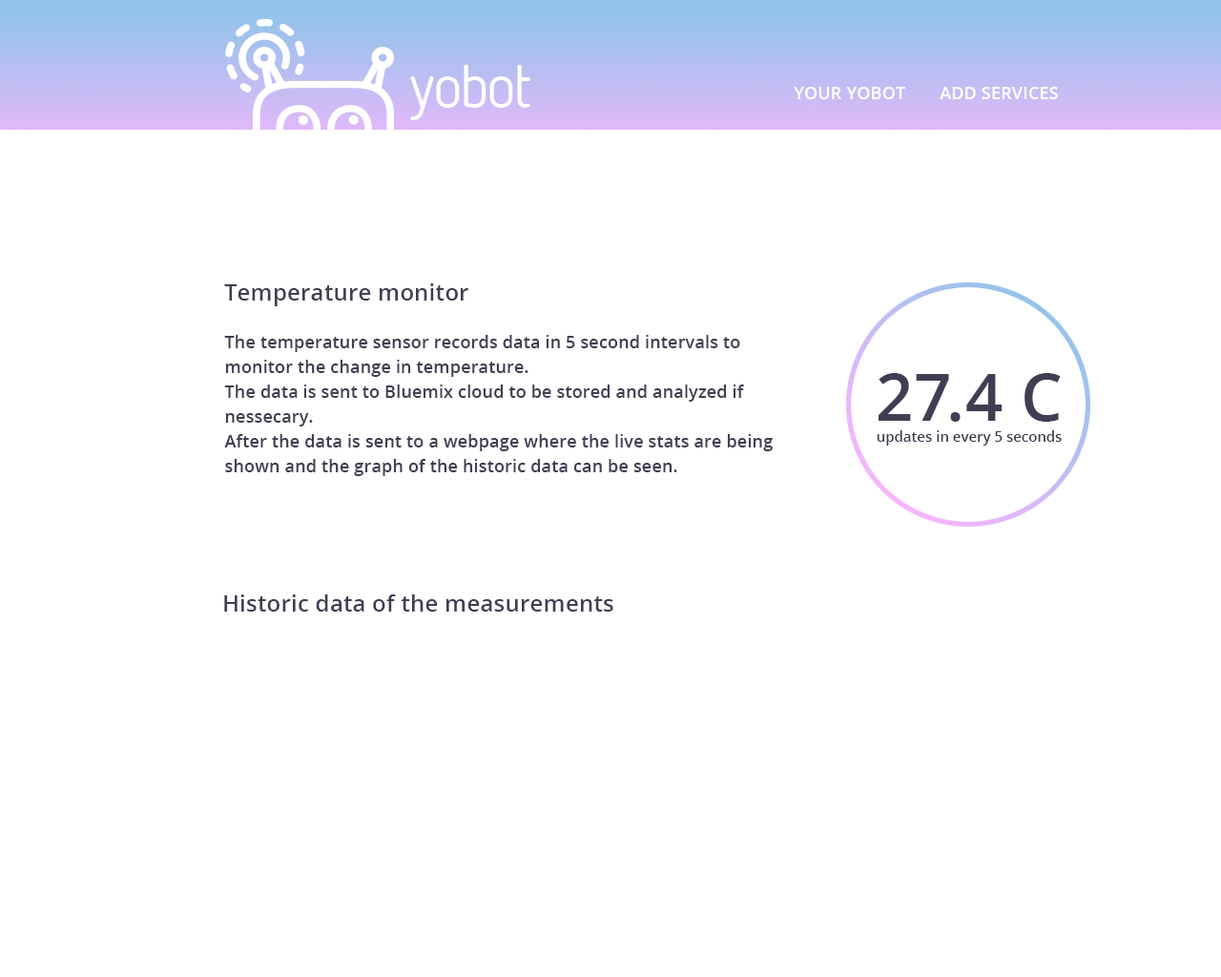
<style>
.page{position:relative;width:1221px;height:977px;background:#ffffff}
.page>*{position:absolute;margin:0}
.t1{font:17.2px "OpenSans-Semibold";letter-spacing:0.01em;color:#ffffff;text-transform:uppercase}
.t2{font:22.9px "OpenSans-Semibold";letter-spacing:0.01em;color:#433d54}
.t3{font:17.2px/24.8px "OpenSans-Semibold";letter-spacing:0.01em;color:#433d54}
.t4{font:65.5px "OpenSans-Semibold";letter-spacing:0.01em;color:#433d54}
.t5{font:14px "OpenSans-Semibold";letter-spacing:0.01em;color:#433d54}
</style>
<div class="page">
<p class="t1" style="left:794px;top:87px;width:111px;height:12px">your yobot</p>
<p class="t1" style="left:940px;top:87px;width:118px;height:12px">add services</p>
<p class="t2" style="left:224px;top:283px;width:244px;height:23px">Temperature monitor</p>
<p class="t3" style="left:224px;top:335px;width:549px;height:141px">The temperature sensor records data in 5 second intervals to monitor the change in temperature.<br>The data is sent to Bluemix cloud to be stored and analyzed if nessecary. <br>After the data is sent to a webpage where the live stats are being shown and the graph of the historic data can be seen.</p>
<p class="t4" style="left:878px;top:373px;width:183px;height:49px">27.4 C</p>
<p class="t5" style="left:877px;top:430px;width:185px;height:15px">updates in every 5 seconds</p>
<p class="t2" style="left:224px;top:594px;width:389px;height:17px">Historic data of the measurements</p>
</div>
